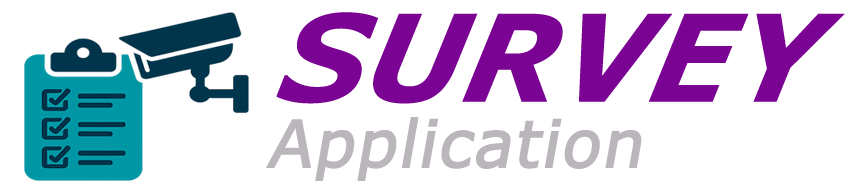
<style>
.page{position:relative;width:867px;height:196px;background:#ffffff}
.page>*{position:absolute;margin:0}
.t1{font:120.7px "Verdana-BoldItalic";color:#7a0393;font-style:italic}
.t2{font:64.7px "Verdana";color:#bab6bb;font-weight:bold;font-style:italic}
</style>
<div class="page">
<p class="t1" style="left:276px;top:12px;width:569px;height:92px">SURVEY</p>
<p class="t2" style="left:266px;top:117px;width:376px;height:64px">Application</p>
</div>
